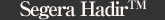
<style>
.page{position:relative;width:165px;height:20px;background:#333333}
.page>*{position:absolute;margin:0}
.t1{font:20px "RyuminPro-ExBold";letter-spacing:-0.08em;color:#fff7f3}
</style>
<div class="page">
<p class="t1" style="left:20px;top:0px;width:127px;height:20px">Segera HadirTM</p>
</div>
